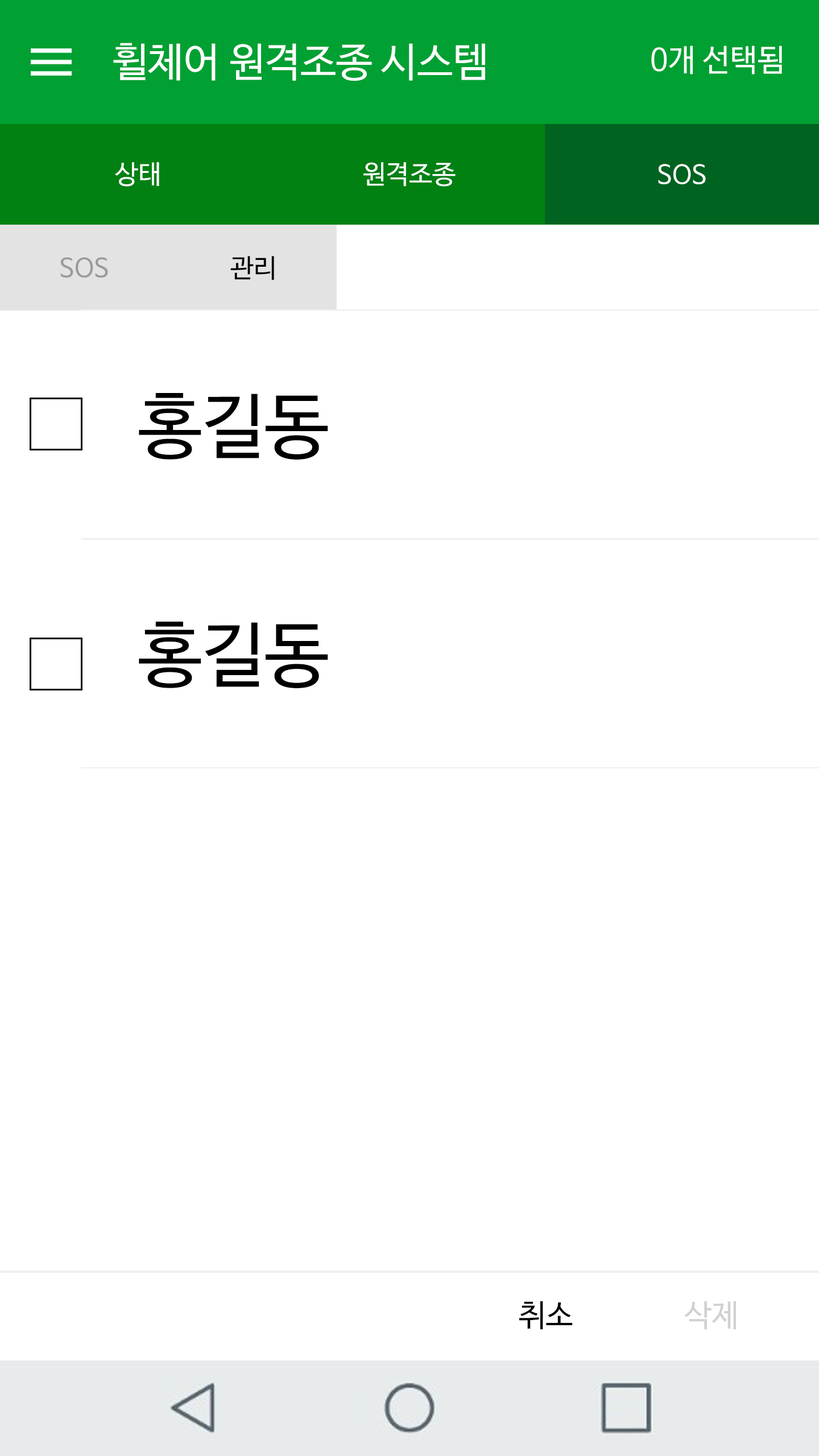
<style>
.page{position:relative;width:819px;height:1456px;background:#ffffff}
.page>*{position:absolute;margin:0}
.t1{font:40.3px "NanumBarunGothicOTF";color:#ffffff}
.t2{font:30.8px "NanumBarunGothicOTF";color:#ffffff}
.t3{font:26.1px "NanumBarunGothicOTF";color:#ffffff}
.t4{font:26.1px "NanumBarunGothicOTF";color:#9a9a9a}
.t5{font:26.1px "NanumBarunGothicOTF";color:#000000}
.t6{font:71.1px "NanumBarunGothicOTF";color:#000000}
.t7{font:30.8px "NanumBarunGothicOTF";color:#000000}
.t8{font:30.8px "NanumBarunGothicOTF";color:#d1d1d1}
</style>
<div class="page">
<p class="t1" style="left:113px;top:43px;width:372px;height:38px">휠체어 원격조종 시스템</p>
<p class="t2" style="left:651px;top:45px;width:131px;height:30px">0개 선택됨</p>
<p class="t3" style="left:115px;top:162px;width:44px;height:25px">상태</p>
<p class="t3" style="left:363px;top:162px;width:93px;height:25px">원격조종</p>
<p class="t3" style="left:658px;top:164px;width:48px;height:20px">SOS</p>
<p class="t4" style="left:60px;top:257px;width:48px;height:21px">SOS</p>
<p class="t5" style="left:230px;top:256px;width:44px;height:24px">관리</p>
<p class="t6" style="left:139px;top:393px;width:189px;height:67px">홍길동</p>
<p class="t6" style="left:139px;top:622px;width:189px;height:66px">홍길동</p>
<p class="t7" style="left:519px;top:1301px;width:54px;height:29px">취소</p>
<p class="t8" style="left:684px;top:1301px;width:52px;height:29px">삭제</p>
</div>
